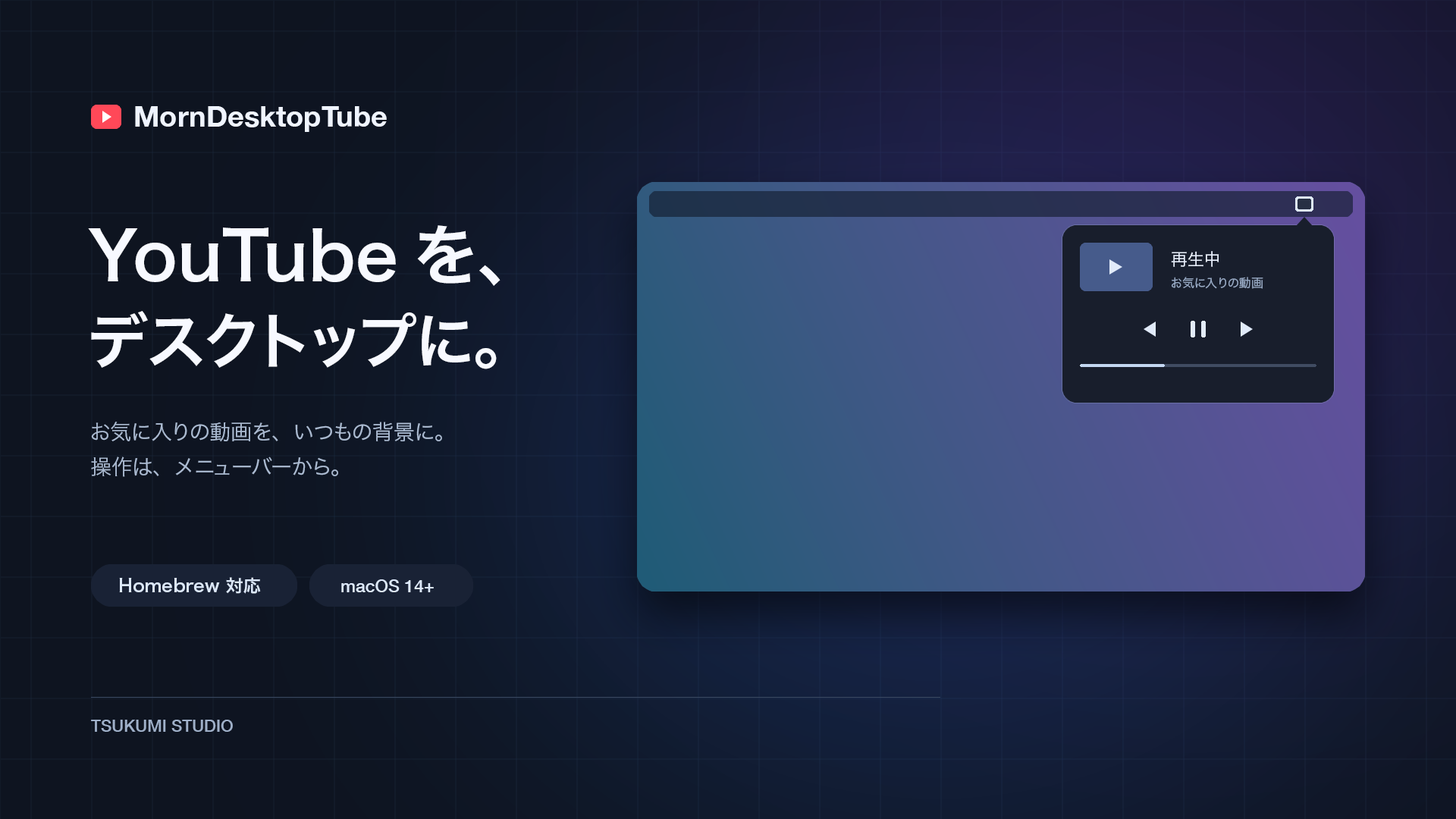
<style>
.page{position:relative;width:1456px;height:819px}
.page>*{position:absolute;margin:0}
.t1{font:28.8px "HelveticaNeue-Bold";color:#eff4ff}
.t2{font:66.7px "HiraginoSans-W6";color:#f7f9ff}
.t3{font:16.7px "HiraginoSans-W3";color:#e7eefb}
.t4{font:12.1px "HiraginoSans-W3";color:#97a9c4}
.t5{font:60.7px "HiraginoSans-W6";color:#f7f9ff}
.t6{font:21.2px "HiraginoSans-W3";color:#abbbd2}
.t7{font:17.4px "HiraginoSans-W6";color:#dce8fa}
.t8{font:17.4px "HelveticaNeue-Medium";color:#dce8fa}
.t9{font:16.7px "HelveticaNeue-Medium";color:#9fb0c9}
</style>
<div class="page">
<p class="t1" style="left:135px;top:106px;width:252px;height:26px">MornDesktopTube</p>
<p class="t2" style="left:88px;top:225px;width:412px;height:61px">YouTubeを、</p>
<p class="t3" style="left:1171px;top:251px;width:48px;height:16px">再生中</p>
<p class="t4" style="left:1172px;top:277px;width:91px;height:12px">お気に入りの動画</p>
<p class="t5" style="left:91px;top:311px;width:406px;height:58px">デスクトップに。</p>
<p class="t6" style="left:91px;top:422px;width:351px;height:20px">お気に入りの動画を、いつもの背景に。</p>
<p class="t6" style="left:91px;top:457px;width:247px;height:20px">操作は、メニューバーから。</p>
<p class="t7" style="left:119px;top:577px;width:142px;height:17px">Homebrew 対応</p>
<p class="t8" style="left:341px;top:579px;width:93px;height:13px">macOS 14+</p>
<p class="t9" style="left:91px;top:720px;width:142px;height:12px">TSUKUMI STUDIO</p>
</div>
